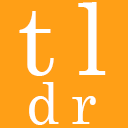
<style>
.page{position:relative;width:128px;height:128px;background:#ff9f16}
.page>*{position:absolute;margin:0}
.t1{font:100px "CenturySchoolbook";letter-spacing:0.2em;color:#ffffff}
.t2{font:58.3px "CenturySchoolbook";letter-spacing:0.2em;color:#ffffff}
</style>
<div class="page">
<p class="t1" style="left:19px;top:2px;width:87px;height:74px">tl</p>
<p class="t2" style="left:29px;top:82px;width:67px;height:43px">dr</p>
</div>
